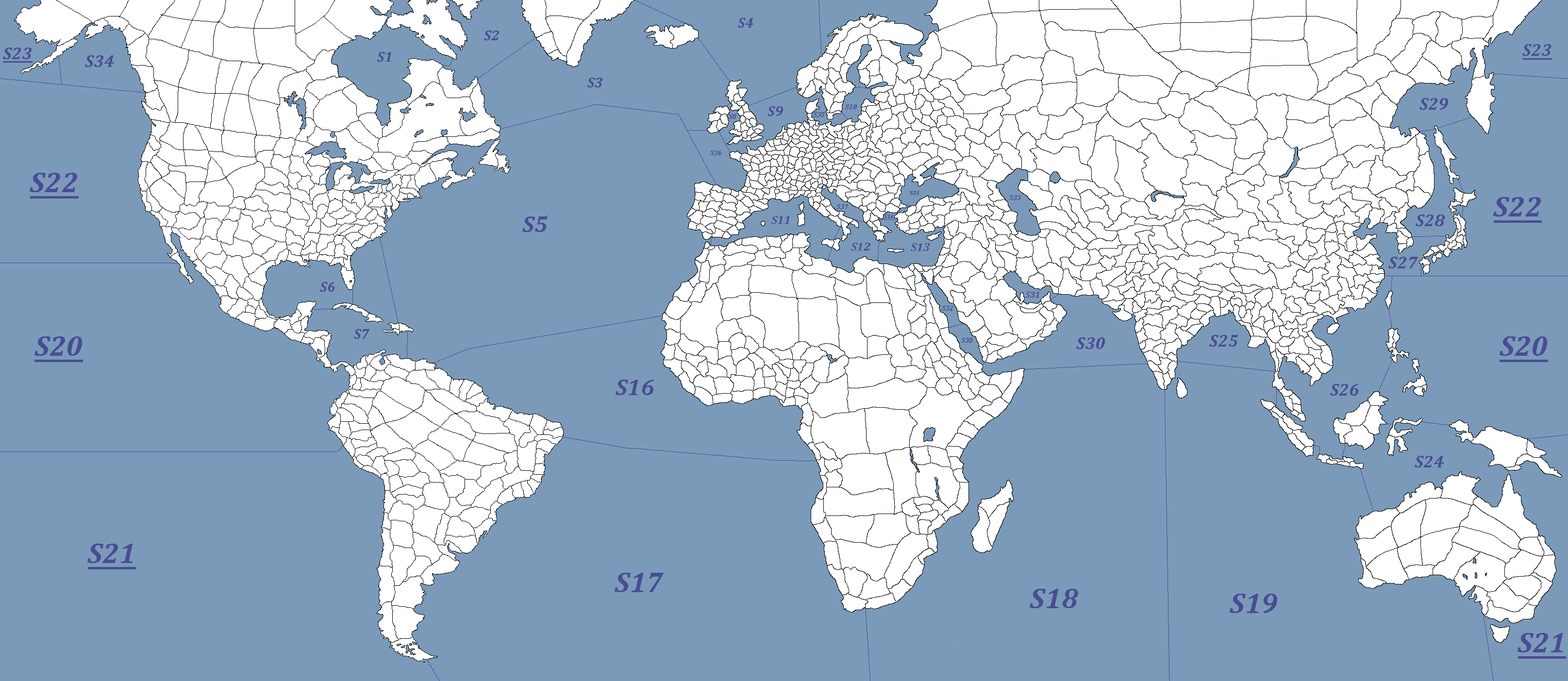
<style>
.page{position:relative;width:1568px;height:681px;background:#7b9ab9}
.page>*{position:absolute;margin:0}
.t1{font:14.6px "Cambria-BoldItalic";color:#494d94}
.t2{font:17.5px "Cambria-BoldItalic";color:#494d94;text-decoration:underline}
.t3{font:17.5px "Cambria-BoldItalic";color:#494d94}
.t4{font:6.8px "Cambria-BoldItalic";color:#494d94}
.t5{font:29.1px "Cambria-BoldItalic";color:#494d94;text-decoration:underline}
.t6{font:5.8px "Cambria-BoldItalic";color:#494d94}
.t7{font:23.3px "Cambria-BoldItalic";color:#494d94}
.t8{font:11.7px "Cambria-BoldItalic";color:#494d94}
.t9{font:8.7px "Cambria-BoldItalic";color:#494d94}
.t10{font:29.1px "Cambria-BoldItalic";color:#494d94}
</style>
<div class="page">
<p class="t1" style="left:738px;top:18px;width:15px;height:10px">S4</p>
<p class="t1" style="left:484px;top:31px;width:15px;height:9px">S2</p>
<p class="t2" style="left:3px;top:48px;width:30px;height:15px">S23</p>
<p class="t1" style="left:377px;top:52px;width:14px;height:10px">S1</p>
<p class="t2" style="left:1522px;top:44px;width:30px;height:16px">S23</p>
<p class="t3" style="left:85px;top:55px;width:29px;height:12px">S34</p>
<p class="t1" style="left:587px;top:78px;width:15px;height:9px">S3</p>
<p class="t3" style="left:1419px;top:98px;width:29px;height:12px">S29</p>
<p class="t1" style="left:767px;top:106px;width:16px;height:10px">S9</p>
<p class="t4" style="left:813px;top:112px;width:12px;height:5px">S35</p>
<p class="t4" style="left:845px;top:104px;width:12px;height:5px">S10</p>
<p class="t4" style="left:729px;top:114px;width:7px;height:5px">S8</p>
<p class="t4" style="left:710px;top:150px;width:11px;height:5px">S36</p>
<p class="t5" style="left:30px;top:173px;width:49px;height:26px">S22</p>
<p class="t6" style="left:910px;top:191px;width:9px;height:4px">S15</p>
<p class="t4" style="left:1009px;top:195px;width:12px;height:5px">S33</p>
<p class="t5" style="left:1493px;top:197px;width:49px;height:26px">S22</p>
<p class="t4" style="left:836px;top:204px;width:12px;height:5px">S37</p>
<p class="t7" style="left:522px;top:216px;width:26px;height:16px">S5</p>
<p class="t8" style="left:771px;top:216px;width:18px;height:8px">S11</p>
<p class="t6" style="left:884px;top:215px;width:10px;height:3px">S14</p>
<p class="t3" style="left:1416px;top:215px;width:29px;height:11px">S28</p>
<p class="t8" style="left:851px;top:243px;width:19px;height:7px">S12</p>
<p class="t8" style="left:911px;top:243px;width:19px;height:8px">S13</p>
<p class="t3" style="left:1388px;top:257px;width:30px;height:11px">S27</p>
<p class="t1" style="left:320px;top:282px;width:14px;height:10px">S6</p>
<p class="t9" style="left:1026px;top:292px;width:13px;height:6px">S31</p>
<p class="t4" style="left:942px;top:306px;width:11px;height:5px">S32</p>
<p class="t1" style="left:354px;top:329px;width:15px;height:10px">S7</p>
<p class="t5" style="left:34px;top:336px;width:49px;height:26px">S20</p>
<p class="t4" style="left:961px;top:338px;width:12px;height:5px">S38</p>
<p class="t3" style="left:1076px;top:337px;width:29px;height:12px">S30</p>
<p class="t3" style="left:1209px;top:334px;width:29px;height:13px">S25</p>
<p class="t5" style="left:1500px;top:336px;width:48px;height:26px">S20</p>
<p class="t7" style="left:616px;top:380px;width:38px;height:15px">S16</p>
<p class="t3" style="left:1330px;top:384px;width:28px;height:12px">S26</p>
<p class="t3" style="left:1415px;top:456px;width:29px;height:11px">S24</p>
<p class="t5" style="left:87px;top:544px;width:49px;height:25px">S21</p>
<p class="t10" style="left:615px;top:573px;width:49px;height:19px">S17</p>
<p class="t10" style="left:1030px;top:589px;width:48px;height:19px">S18</p>
<p class="t10" style="left:1230px;top:594px;width:47px;height:19px">S19</p>
<p class="t5" style="left:1518px;top:633px;width:48px;height:26px">S21</p>
</div>
